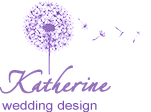
<style>
.page{position:relative;width:151px;height:112px;background:#ffffff}
.page>*{position:absolute;margin:0}
.t1{font:36.3px "AlexandraZeferinoOne";color:#9470bd;font-weight:bold}
.t2{font:36.3px "AlexandraZeferinoOne";color:#9470bd;text-transform:uppercase;font-weight:bold}
.t3{font:12.4px "ArialMT";color:#7e4fb3;scale:1.13 1}
</style>
<div class="page">
<p class="t1" style="left:0px;top:65px;width:111px;height:29px"><span class="t2">k</span>atherine</p>
<p class="t3" style="left:2px;top:100px;width:95px;height:13px">wedding design</p>
</div>
